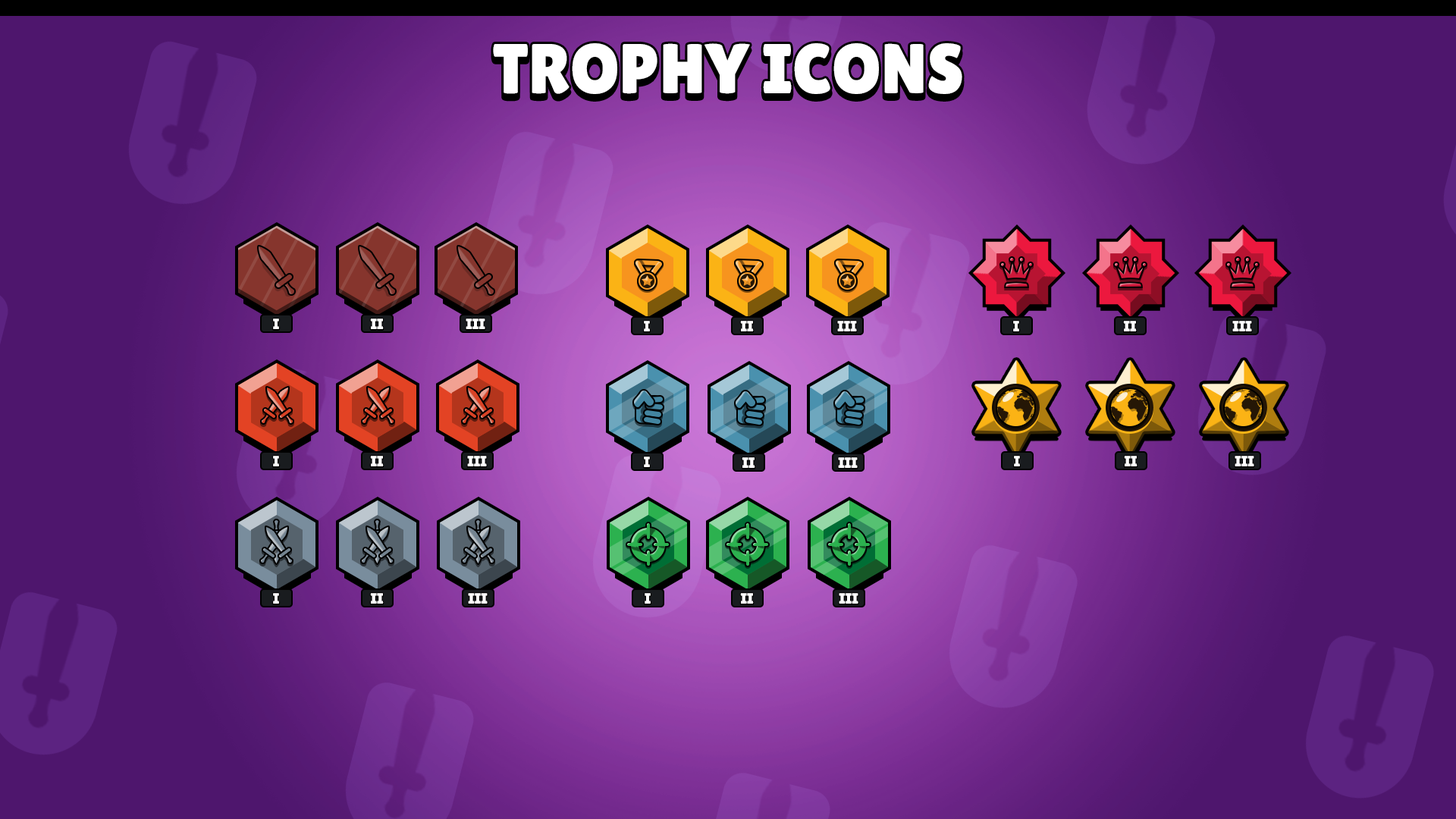
<style>
.page{position:relative;width:1456px;height:819px;background:#4e166d}
.page>*{position:absolute;margin:0}
.t1{font:70.6px "LilitaOne";color:#ffffff}
.t2{font:15px "LilitaOne";color:#ffffff}
</style>
<div class="page">
<p class="t1" style="left:493px;top:49px;width:469px;height:50px">TROPHY ICONS</p>
<p class="t1" style="left:493px;top:43px;width:469px;height:51px">TROPHY ICONS</p>
<p class="t2" style="left:273px;top:319px;width:6px;height:11px">I</p>
<p class="t2" style="left:273px;top:318px;width:6px;height:11px">I</p>
<p class="t2" style="left:370px;top:319px;width:14px;height:11px">II</p>
<p class="t2" style="left:370px;top:318px;width:14px;height:11px">II</p>
<p class="t2" style="left:466px;top:319px;width:19px;height:11px">III</p>
<p class="t2" style="left:466px;top:318px;width:19px;height:11px">III</p>
<p class="t2" style="left:644px;top:322px;width:6px;height:10px">I</p>
<p class="t2" style="left:644px;top:321px;width:6px;height:10px">I</p>
<p class="t2" style="left:740px;top:322px;width:14px;height:10px">II</p>
<p class="t2" style="left:740px;top:321px;width:14px;height:10px">II</p>
<p class="t2" style="left:837px;top:322px;width:20px;height:10px">III</p>
<p class="t2" style="left:837px;top:321px;width:20px;height:10px">III</p>
<p class="t2" style="left:1013px;top:322px;width:6px;height:10px">I</p>
<p class="t2" style="left:1013px;top:321px;width:6px;height:10px">I</p>
<p class="t2" style="left:1123px;top:322px;width:14px;height:10px">II</p>
<p class="t2" style="left:1123px;top:321px;width:14px;height:10px">II</p>
<p class="t2" style="left:1232px;top:322px;width:20px;height:10px">III</p>
<p class="t2" style="left:1232px;top:321px;width:20px;height:10px">III</p>
<p class="t2" style="left:273px;top:457px;width:6px;height:10px">I</p>
<p class="t2" style="left:273px;top:456px;width:6px;height:10px">I</p>
<p class="t2" style="left:370px;top:457px;width:14px;height:10px">II</p>
<p class="t2" style="left:370px;top:456px;width:14px;height:10px">II</p>
<p class="t2" style="left:467px;top:457px;width:20px;height:10px">III</p>
<p class="t2" style="left:467px;top:456px;width:20px;height:10px">III</p>
<p class="t2" style="left:644px;top:457px;width:6px;height:11px">I</p>
<p class="t2" style="left:644px;top:457px;width:6px;height:10px">I</p>
<p class="t2" style="left:742px;top:458px;width:13px;height:11px">II</p>
<p class="t2" style="left:742px;top:457px;width:13px;height:11px">II</p>
<p class="t2" style="left:838px;top:458px;width:20px;height:11px">III</p>
<p class="t2" style="left:838px;top:457px;width:20px;height:11px">III</p>
<p class="t2" style="left:1014px;top:457px;width:6px;height:10px">I</p>
<p class="t2" style="left:1014px;top:456px;width:6px;height:10px">I</p>
<p class="t2" style="left:1124px;top:457px;width:13px;height:10px">II</p>
<p class="t2" style="left:1124px;top:456px;width:13px;height:10px">II</p>
<p class="t2" style="left:1235px;top:457px;width:19px;height:10px">III</p>
<p class="t2" style="left:1235px;top:456px;width:19px;height:10px">III</p>
<p class="t2" style="left:273px;top:594px;width:6px;height:10px">I</p>
<p class="t2" style="left:273px;top:593px;width:6px;height:11px">I</p>
<p class="t2" style="left:370px;top:594px;width:14px;height:10px">II</p>
<p class="t2" style="left:370px;top:593px;width:14px;height:11px">II</p>
<p class="t2" style="left:468px;top:594px;width:20px;height:10px">III</p>
<p class="t2" style="left:468px;top:593px;width:20px;height:11px">III</p>
<p class="t2" style="left:645px;top:594px;width:6px;height:10px">I</p>
<p class="t2" style="left:645px;top:593px;width:6px;height:11px">I</p>
<p class="t2" style="left:740px;top:594px;width:14px;height:10px">II</p>
<p class="t2" style="left:740px;top:593px;width:14px;height:11px">II</p>
<p class="t2" style="left:839px;top:594px;width:19px;height:10px">III</p>
<p class="t2" style="left:839px;top:593px;width:19px;height:11px">III</p>
</div>
